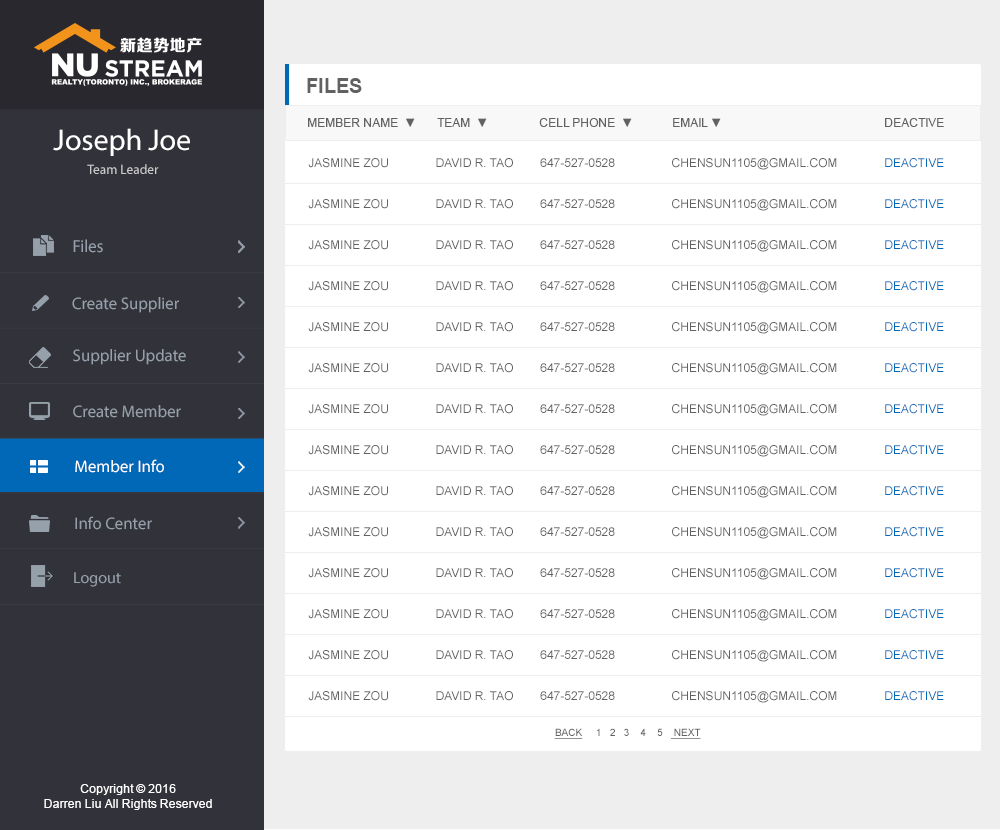
<style>
.page{position:relative;width:1000px;height:830px;background:#ffffff}
.page>*{position:absolute;margin:0}
.t1{font:20px "Arial-BoldMT";color:#616161}
.t2{font:12px "ArialMT";color:#616161;text-transform:uppercase}
.t3{font:30px "MyriadPro-Regular";color:#ffffff}
.t4{font:12px "ArialMT";color:#9c9c9c;text-transform:uppercase}
.t5{font:12px "ArialMT";color:#0068b7;text-transform:uppercase}
.t6{font:13.4px "MyriadPro-Regular";color:#cccccc}
.t7{font:17.6px "MyriadPro-Regular";color:#95a0aa;scale:0.96 1}
.t8{font:16.8px "MyriadPro-Regular";color:#95a0aa}
.t9{font:16.8px "MyriadPro-Regular";color:#ffffff}
.t10{font:16px "MyriadPro-Regular";color:#95a0aa}
.t11{font:10px "ArialMT";color:#616161;text-transform:uppercase}
.t12{font:10px "ArialMT";color:#616161;text-transform:uppercase;text-decoration:underline}
.t13{font:12px "ArialMT";color:#ffffff}
</style>
<div class="page">
<p class="t1" style="left:307px;top:78px;width:55px;height:15px">FILES</p>
<p class="t2" style="left:308px;top:118px;width:636px;height:9px">Member Name  ▼       Team  ▼                 cell phone  ▼             EMAIL ▼                                                      DEACTIVE</p>
<p class="t3" style="left:53px;top:128px;width:137px;height:28px">Joseph Joe</p>
<p class="t2" style="left:308px;top:158px;width:636px;height:12px"><span class="t4"> </span> Jasmine Zou              David R. Tao        647-527-0528                 CHENSUN1105@GMAIL.COM              <span class="t5">deactive</span></p>
<p class="t6" style="left:87px;top:164px;width:72px;height:10px">Team Leader</p>
<p class="t2" style="left:308px;top:199px;width:636px;height:12px"><span class="t4"> </span> Jasmine Zou              David R. Tao        647-527-0528                 CHENSUN1105@GMAIL.COM              <span class="t5">deactive</span></p>
<p class="t7" style="left:73px;top:239px;width:30px;height:14px">Files</p>
<p class="t2" style="left:308px;top:240px;width:636px;height:12px"><span class="t4"> </span> Jasmine Zou              David R. Tao        647-527-0528                 CHENSUN1105@GMAIL.COM              <span class="t5">deactive</span></p>
<p class="t2" style="left:308px;top:281px;width:636px;height:12px"><span class="t4"> </span> Jasmine Zou              David R. Tao        647-527-0528                 CHENSUN1105@GMAIL.COM              <span class="t5">deactive</span></p>
<p class="t8" style="left:72px;top:297px;width:107px;height:16px">Create Supplier</p>
<p class="t2" style="left:308px;top:322px;width:636px;height:12px"><span class="t4"> </span> Jasmine Zou              David R. Tao        647-527-0528                 CHENSUN1105@GMAIL.COM              <span class="t5">deactive</span></p>
<p class="t8" style="left:73px;top:349px;width:113px;height:16px">Supplier Update</p>
<p class="t2" style="left:308px;top:363px;width:636px;height:12px"><span class="t4"> </span> Jasmine Zou              David R. Tao        647-527-0528                 CHENSUN1105@GMAIL.COM              <span class="t5">deactive</span></p>
<p class="t8" style="left:73px;top:405px;width:108px;height:13px">Create Member</p>
<p class="t2" style="left:308px;top:404px;width:636px;height:12px"><span class="t4"> </span> Jasmine Zou              David R. Tao        647-527-0528                 CHENSUN1105@GMAIL.COM              <span class="t5">deactive</span></p>
<p class="t2" style="left:308px;top:445px;width:636px;height:12px"><span class="t4"> </span> Jasmine Zou              David R. Tao        647-527-0528                 CHENSUN1105@GMAIL.COM              <span class="t5">deactive</span></p>
<p class="t9" style="left:75px;top:459px;width:89px;height:14px">Member Info</p>
<p class="t2" style="left:308px;top:486px;width:636px;height:12px"><span class="t4"> </span> Jasmine Zou              David R. Tao        647-527-0528                 CHENSUN1105@GMAIL.COM              <span class="t5">deactive</span></p>
<p class="t8" style="left:75px;top:516px;width:77px;height:14px">Info Center</p>
<p class="t2" style="left:308px;top:527px;width:636px;height:12px"><span class="t4"> </span> Jasmine Zou              David R. Tao        647-527-0528                 CHENSUN1105@GMAIL.COM              <span class="t5">deactive</span></p>
<p class="t2" style="left:308px;top:568px;width:636px;height:12px"><span class="t4"> </span> Jasmine Zou              David R. Tao        647-527-0528                 CHENSUN1105@GMAIL.COM              <span class="t5">deactive</span></p>
<p class="t10" style="left:74px;top:572px;width:47px;height:15px">Logout</p>
<p class="t2" style="left:308px;top:609px;width:636px;height:12px"><span class="t4"> </span> Jasmine Zou              David R. Tao        647-527-0528                 CHENSUN1105@GMAIL.COM              <span class="t5">deactive</span></p>
<p class="t2" style="left:308px;top:650px;width:636px;height:12px"><span class="t4"> </span> Jasmine Zou              David R. Tao        647-527-0528                 CHENSUN1105@GMAIL.COM              <span class="t5">deactive</span></p>
<p class="t2" style="left:308px;top:691px;width:636px;height:12px"><span class="t4"> </span> Jasmine Zou              David R. Tao        647-527-0528                 CHENSUN1105@GMAIL.COM              <span class="t5">deactive</span></p>
<p class="t11" style="left:554px;top:728px;width:147px;height:11px"><span class="t12">back</span>     1   2   3    4    5   <span class="t12"> next</span></p>
<p class="t13" style="left:44px;top:784px;width:168px;height:26px;text-align:center">Copyright © 2016<br>Darren Liu All Rights Reserved</p>
</div>
